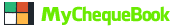
<style>
.page{position:relative;width:178px;height:28px;background:#ffffff}
.page>*{position:absolute;margin:0}
.t1{font:18.7px "FacebookLetterFaces";letter-spacing:-0.025em;color:#6aeb01}
</style>
<div class="page">
<p class="t1" style="left:41px;top:6px;width:129px;height:20px">MyChequeBook</p>
</div>
